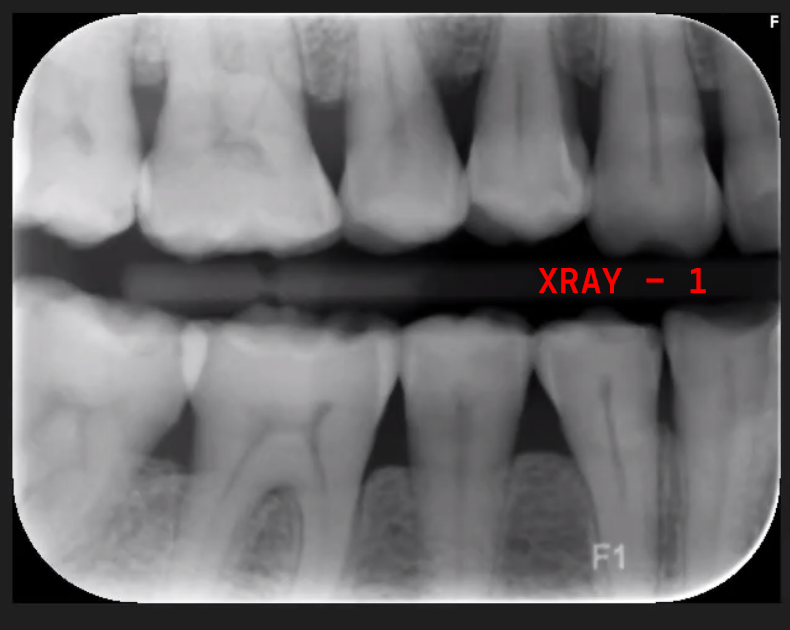
<style>
.page{position:relative;width:790px;height:630px}
.page>*{position:absolute;margin:0}
.t1{font:36px "CascadiaMonoRoman-SemiBold";letter-spacing:0.04em;color:#ff0000;scale:0.95 1}
</style>
<div class="page">
<p class="t1" style="left:538px;top:268px;width:168px;height:25px">XRAY - 1</p>
</div>
